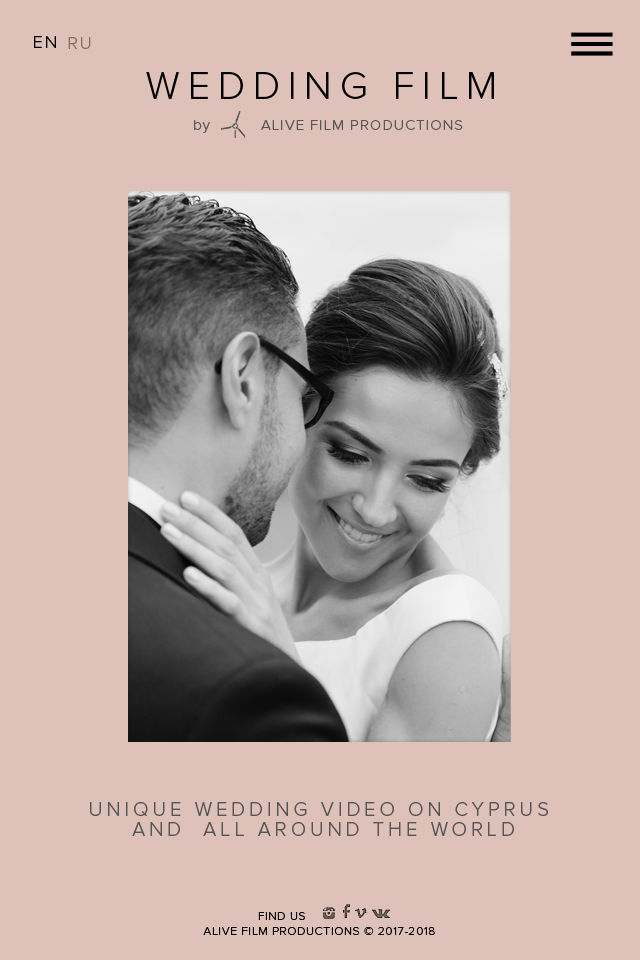
<style>
.page{position:relative;width:640px;height:960px;background:#dec1b9}
.page>*{position:absolute;margin:0}
.t1{font:17.8px "ProximaNova-Light";letter-spacing:0.1em;color:#000000;text-transform:uppercase}
.t2{font:17.8px "ProximaNova-Light";letter-spacing:0.1em;color:#846f60;text-transform:uppercase}
.t3{font:39.2px "ProximaNova-Light";letter-spacing:0.2em;color:#000000;text-transform:uppercase}
.t4{font:14.9px "ProximaNova-Light";letter-spacing:0.075em;color:#565656}
.t5{font:20px/20px "ProximaNova-Light";letter-spacing:0.2em;color:#555555;text-transform:uppercase}
.t6{font:12px "ProximaNova-Light";letter-spacing:0.05em;color:#000000}
.t7{font:12px "Tahoma";letter-spacing:0.05em;color:#000000}
</style>
<div class="page">
<p class="t1" style="left:34px;top:36px;width:22px;height:12px">en</p>
<p class="t2" style="left:68px;top:37px;width:23px;height:12px">ru</p>
<p class="t3" style="left:146px;top:72px;width:348px;height:27px">Wedding FILM</p>
<p class="t4" style="left:194px;top:120px;width:269px;height:13px">by          ALIVE FILM PRODUCTIONS</p>
<p class="t5" style="left:90px;top:802px;width:458px;height:34px;text-align:center">Unique wedding video on Cyprus<br> and  all around THE WORLD</p>
<p class="t6" style="left:258px;top:912px;width:47px;height:8px"><span class="t7">      </span>FIND US</p>
<p class="t6" style="left:203px;top:927px;width:232px;height:8px">ALIVE FILM PRODUCTIONS © 2017-2018</p>
</div>
